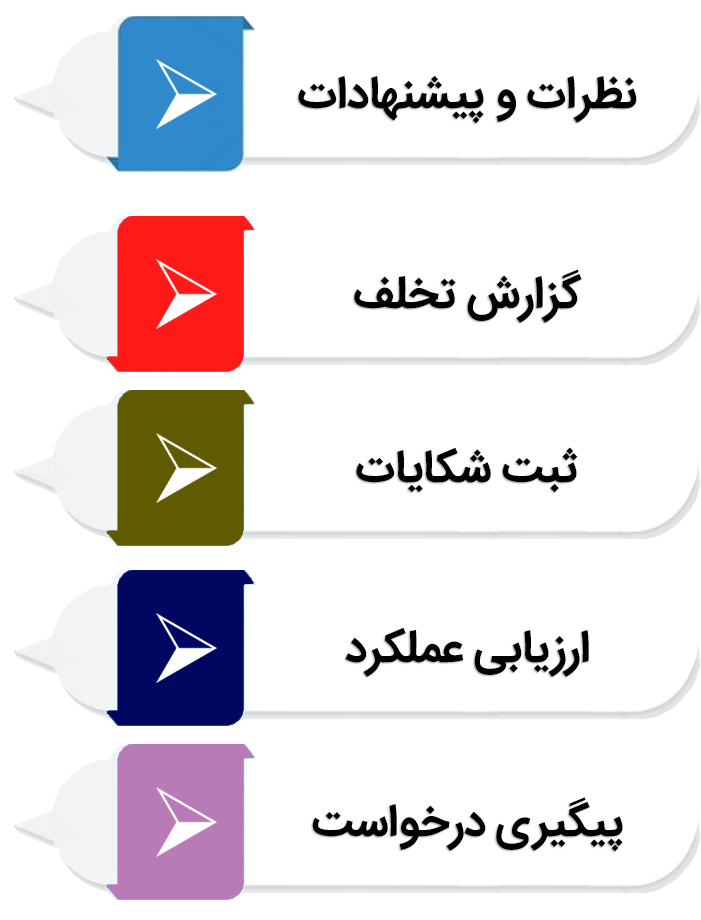
<style>
.page{position:relative;width:701px;height:920px;background:#ffffff}
.page>*{position:absolute;margin:0}
.t1{font:45px "IRANSans-Bold";color:#000000}
</style>
<div class="page">
<p class="t1" style="left:298px;top:75px;width:339px;height:49px">نظرات و پیشنهادات</p>
<p class="t1" style="left:354px;top:269px;width:228px;height:54px">گزارش تخلف</p>
<p class="t1" style="left:356px;top:447px;width:222px;height:46px">ثبت شکایات</p>
<p class="t1" style="left:345px;top:627px;width:244px;height:50px">ارزیابی عملکرد</p>
<p class="t1" style="left:312px;top:797px;width:311px;height:55px">پیگیری درخواست</p>
</div>
